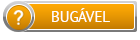
<style>
.page{position:relative;width:140px;height:40px;background:#ffffff}
.page>*{position:absolute;margin:0}
.t1{font:15px "PTSans-Regular";letter-spacing:-0.02em;color:#ffffff;text-transform:uppercase}
</style>
<div class="page">
<p class="t1" style="left:52px;top:8px;width:58px;height:14px">bugável</p>
</div>
